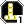
<style>
.page{position:relative;width:24px;height:24px;background:#ffffff}
.page>*{position:absolute;margin:0}
.t1{font:9px "Montserrat-Bold";color:#000000}
</style>
<div class="page">
<p class="t1" style="left:18px;top:16px;width:4px;height:7px">1</p>
</div>
